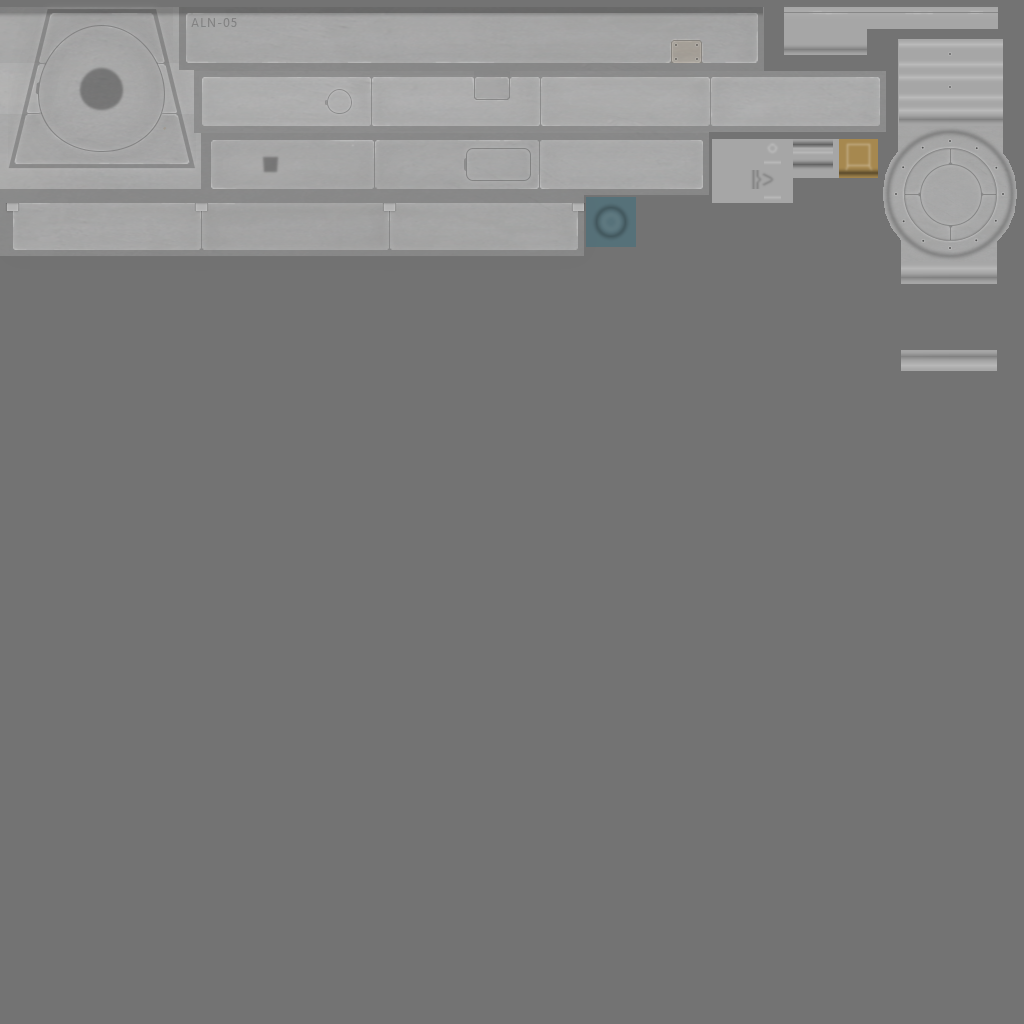
<style>
.page{position:relative;width:1024px;height:1024px;background:#737373}
.page>*{position:absolute;margin:0}
.t1{font:12px "SegoeUI";letter-spacing:0.1em;color:#838383}
</style>
<div class="page">
<p class="t1" style="left:191px;top:18px;width:46px;height:9px">ALN-05</p>
</div>
